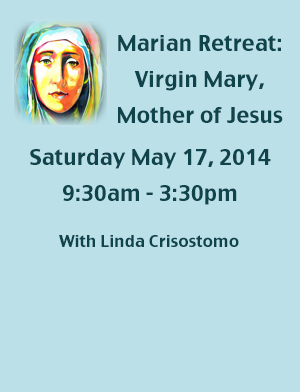
<style>
.page{position:relative;width:300px;height:392px;background:#bce0e8}
.page>*{position:absolute;margin:0}
.t1{font:21px/36px "CharcoalCY";letter-spacing:0.01em;color:#10444c}
.t2{font:16px "CharcoalCY";letter-spacing:0.01em;color:#10444c}
</style>
<div class="page">
<p class="t1" style="left:118px;top:35px;width:165px;height:88px;text-align:center">Marian Retreat:<br>Virgin Mary,<br>Mother of Jesus</p>
<p class="t1" style="left:30px;top:149px;width:241px;height:56px;text-align:center">Saturday May 17, 2014<br>9:30am - 3:30pm</p>
<p class="t2" style="left:59px;top:235px;width:180px;height:12px">With Linda Crisostomo</p>
</div>
